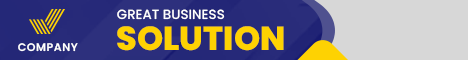
<style>
.page{position:relative;width:468px;height:60px;background:#d7d7d7}
.page>*{position:absolute;margin:0}
.t1{font:13.3px "Poppins-Medium";color:#ffffff}
.t2{font:33.3px "Poppins-ExtraBold";color:#fed202}
.t3{font:11px "Poppins-SemiBold";letter-spacing:0.05em;color:#ffffff}
</style>
<div class="page">
<p class="t1" style="left:117px;top:9px;width:108px;height:11px">GREAT BUSINESS</p>
<p class="t2" style="left:117px;top:26px;width:167px;height:25px">SOLUTION</p>
<p class="t3" style="left:18px;top:43px;width:60px;height:9px">COMPANY</p>
</div>
